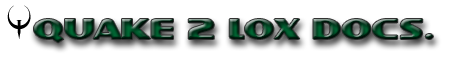
<style>
.page{position:relative;width:468px;height:60px;background:#ffffff}
.page>*{position:absolute;margin:0}
.t1{font:30px "QUAKE2";color:#000000;scale:0.95 1}
.t2{font:30px "SFIntellivisedExtended";scale:0.95 1}
</style>
<div class="page">
<p class="t1" style="left:7px;top:5px;width:24px;height:34px">Q</p>
<p class="t2" style="left:34px;top:19px;width:399px;height:24px">QUAKE 2 LOX DOCS.</p>
</div>
